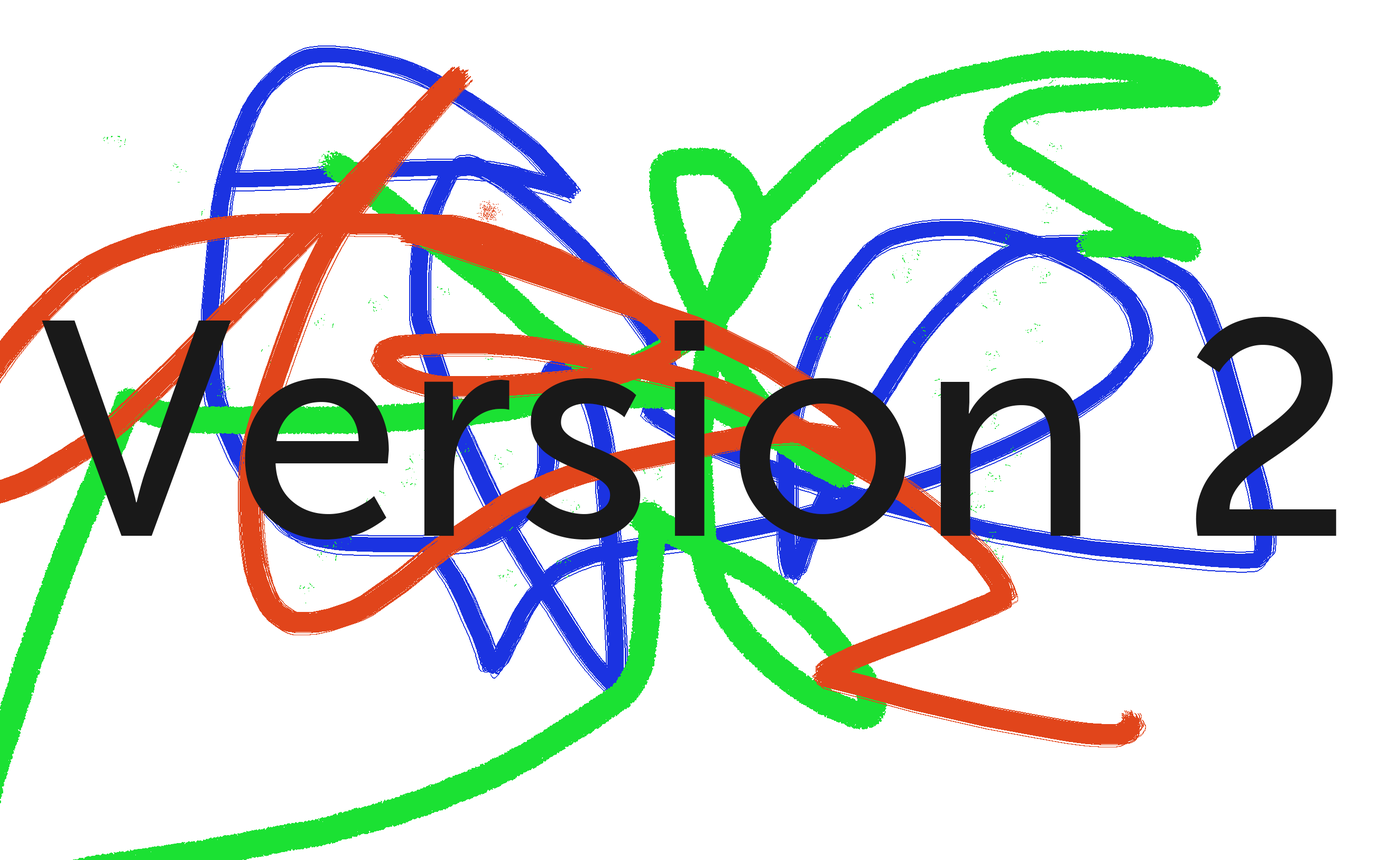
<style>
.page{position:relative;width:1387px;height:860px;background:#ffffff}
.page>*{position:absolute;margin:0}
.t1{font:304.5px "MuseoSans-500";color:#191919}
</style>
<div class="page">
<p class="t1" style="left:42px;top:317px;width:1294px;height:222px">Version 2</p>
</div>
